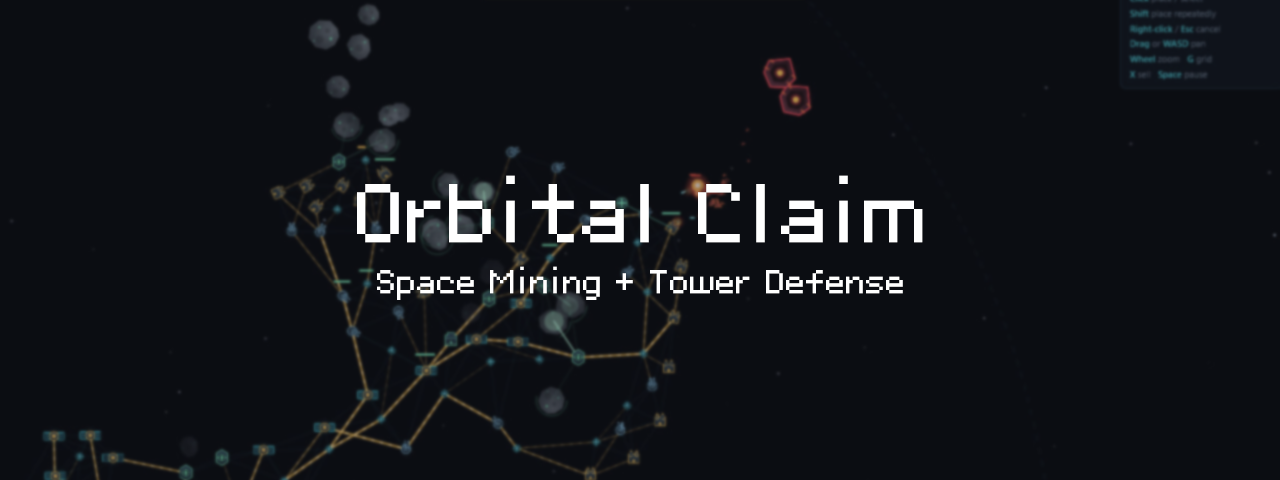
<style>
.page{position:relative;width:1280px;height:480px;background:#0b0d12}
.page>*{position:absolute;margin:0}
.t1{font:83.3px "BoutiqueBitmap9x9_1.92_R";color:#ffffff}
.t2{font:33.3px "BoutiqueBitmap9x9_1.92_R";color:#ffffff}
</style>
<div class="page">
<p class="t1" style="left:357px;top:175px;width:566px;height:68px">Orbital Claim</p>
<p class="t2" style="left:377px;top:266px;width:526px;height:34px">Space Mining + Tower Defense</p>
</div>
